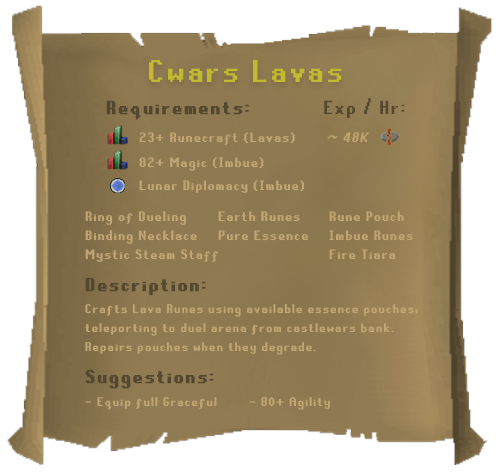
<style>
.page{position:relative;width:500px;height:475px;background:#ffffff}
.page>*{position:absolute;margin:0}
.t1{font:35px "RuneScape-UF";letter-spacing:0.1em;color:#c2b92e}
.t2{font:21px "RuneScape-UF";letter-spacing:0.1em;color:#534730;font-weight:bold}
.t3{font:21px "RuneScape-UF";letter-spacing:0.1em;color:#534730}
.t4{font:15px "RuneScape-UF";letter-spacing:0.1em;color:#c1a674}
.t5{font:15px "RuneScape-UF";letter-spacing:0.1em;color:#c1a674;font-style:italic}
.t6{font:14px/18.7px "RuneScape-UF";letter-spacing:0.1em;color:#c1a674}
.t7{font:14px "RuneScape-UF";letter-spacing:0.1em;color:#c1a674}
</style>
<div class="page">
<p class="t1" style="left:149px;top:60px;width:193px;height:22px">Cwars Lavas</p>
<p class="t2" style="left:106px;top:100px;width:143px;height:20px">Requirements:</p>
<p class="t3" style="left:324px;top:98px;width:81px;height:20px">Exp / Hr:</p>
<p class="t4" style="left:139px;top:132px;width:156px;height:13px">23+ Runecraft (Lavas)</p>
<p class="t5" style="left:327px;top:132px;width:42px;height:11px">~ 48K</p>
<p class="t4" style="left:139px;top:157px;width:125px;height:14px">82+ Magic (Imbue)</p>
<p class="t4" style="left:139px;top:180px;width:166px;height:13px">Lunar Diplomacy (Imbue)</p>
<p class="t4" style="left:85px;top:211px;width:101px;height:14px">Ring of Dueling</p>
<p class="t4" style="left:218px;top:211px;width:82px;height:11px">Earth Runes</p>
<p class="t4" style="left:329px;top:211px;width:75px;height:11px">Rune Pouch</p>
<p class="t4" style="left:85px;top:230px;width:112px;height:14px">Binding Necklace</p>
<p class="t4" style="left:218px;top:230px;width:90px;height:11px">Pure Essence</p>
<p class="t4" style="left:329px;top:230px;width:84px;height:11px">Imbue Runes</p>
<p class="t4" style="left:85px;top:249px;width:134px;height:13px">Mystic Steam Staff</p>
<p class="t4" style="left:329px;top:249px;width:67px;height:11px">Fire Tiara</p>
<p class="t2" style="left:85px;top:277px;width:121px;height:19px">Description:</p>
<p class="t6" style="left:85px;top:304px;width:333px;height:51px">Crafts Lava Runes using available essence pouches,<br>teleporting to duel arena from castlewars bank.<br>Repairs pouches when they degrade.</p>
<p class="t2" style="left:85px;top:369px;width:129px;height:20px">Suggestions:</p>
<p class="t7" style="left:85px;top:397px;width:132px;height:13px">- Equip full Graceful</p>
<p class="t7" style="left:249px;top:397px;width:81px;height:13px">- 80+ Agility</p>
</div>
